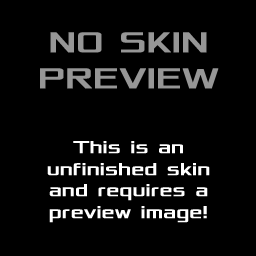
<style>
.page{position:relative;width:256px;height:256px;background:#000000}
.page>*{position:absolute;margin:0}
.t1{font:18px "Xolonium";font-weight:bold}
.t2{font:24px "Xolonium";font-weight:bold}
.t3{font:30px "Xolonium";font-weight:bold}
.t4{font:18px "Xolonium";color:#ffffff;font-weight:bold}
.t5{font:24px "Xolonium";color:#c8e1ff;font-weight:bold}
.t6{font:30px "Xolonium";color:#969696;font-weight:bold}
</style>
<div class="page">
<p class="t1" style="left:40px;top:32px;width:179px;height:191px;text-align:center"><span class="t2"><br></span><span class="t3">NO SKIN PREVIEW<br><br><br></span>This is an unfinished skin  and requires a preview image!</p>
<p class="t1" style="left:40px;top:32px;width:179px;height:191px;text-align:center"><span class="t2"><br></span><span class="t3">NO SKIN PREVIEW<br><br><br></span>This is an unfinished skin  and requires a preview image!</p>
<p class="t4" style="left:40px;top:32px;width:179px;height:191px;text-align:center"><span class="t5"><br></span><span class="t6">NO SKIN PREVIEW<br><br><br></span>This is an unfinished skin  and requires a preview image!</p>
</div>
